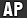
<style>
.page{position:relative;width:27px;height:18px;background:#333333}
.page>*{position:absolute;margin:0}
.t1{font:18px "Swiss721BT-BlackCondensed";color:#ffffff}
</style>
<div class="page">
<p class="t1" style="left:3px;top:2px;width:20px;height:14px">AP</p>
</div>
